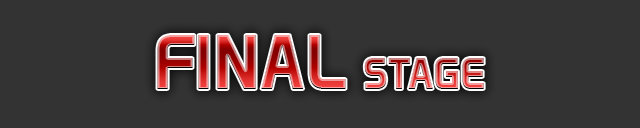
<style>
.page{position:relative;width:640px;height:128px;background:#333333}
.page>*{position:absolute;margin:0}
.t1{font:70px "Venacti-Bold"}
.t2{font:40px "Venacti-Bold";text-transform:uppercase}
</style>
<div class="page">
<p class="t1" style="left:157px;top:35px;width:327px;height:54px">FINAL <span class="t2">Stage</span></p>
</div>
